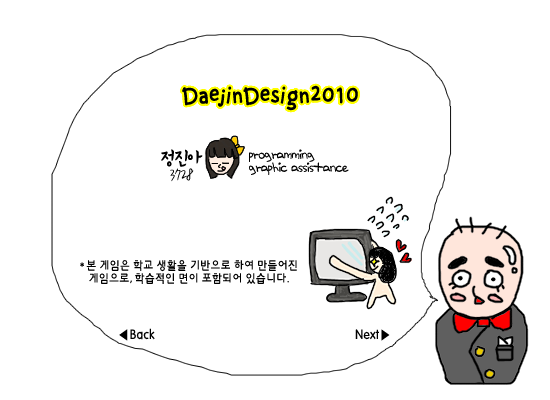
<style>
.page{position:relative;width:550px;height:400px;background:#ffffff}
.page>*{position:absolute;margin:0}
.t1{font:36px "RixGrimmM";letter-spacing:-0.05em;color:#000000;scale:0.9 1}
.t2{font:20px "SachunM";letter-spacing:-0.1em;color:#000000;scale:0.9 1}
.t3{font:14px/13px "Na@Sanha";letter-spacing:-0.05em;color:#000000;scale:0.9 1}
.t4{font:20px "YDBomnalL";letter-spacing:-0.05em;color:#000000;scale:0.9 1}
.t5{font:12px/13px "HYkanM";letter-spacing:-0.05em;color:#000000;scale:0.9 1}
.t6{font:14px "HYkanM";color:#000000;scale:0.9 1}
</style>
<div class="page">
<p class="t1" style="left:182px;top:85px;width:176px;height:26px">DaejinDesign2010</p>
<p class="t2" style="left:161px;top:149px;width:42px;height:18px">정진아</p>
<p class="t3" style="left:249px;top:149px;width:100px;height:26px">programming<br>graphic assistance</p>
<p class="t4" style="left:170px;top:168px;width:24px;height:14px">3728</p>
<p class="t5" style="left:80px;top:260px;width:217px;height:24px">* 본 게임은 학교 생활을 기반으로 하여 만들어진 <br>    게임으로, 학습적인 면이 포함되어 있습니다.</p>
<p class="t6" style="left:119px;top:328px;width:36px;height:13px">◀Back</p>
<p class="t6" style="left:355px;top:329px;width:35px;height:12px">Next▶</p>
</div>
